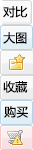
<style>
.page{position:relative;width:33px;height:150px}
.page>*{position:absolute;margin:0}
.t1{font:12px "MicrosoftYaHei";color:#000000}
</style>
<div class="page">
<p class="t1" style="left:3px;top:6px;width:25px;height:12px">对比</p>
<p class="t1" style="left:3px;top:32px;width:24px;height:12px">大图</p>
<p class="t1" style="left:3px;top:81px;width:25px;height:12px">收藏</p>
<p class="t1" style="left:4px;top:106px;width:24px;height:12px">购买</p>
</div>
